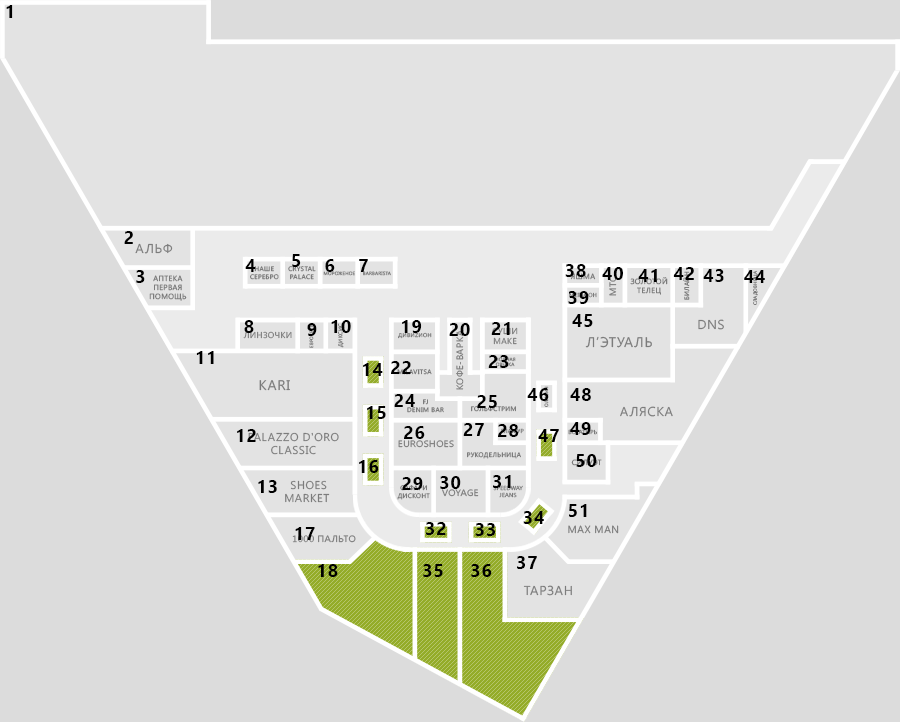
<style>
.page{position:relative;width:900px;height:722px;background:#dcdcdc}
.page>*{position:absolute;margin:0}
.t1{font:18px "SegoeUI-Bold";letter-spacing:0.05em;color:#000000;text-transform:uppercase}
.t2{font:13.1px "SegoeUI";letter-spacing:0.05em;color:#7c7c7c;text-transform:uppercase}
.t3{font:6.6px "SegoeUI";letter-spacing:0.05em;color:#7c7c7c;text-transform:uppercase}
.t4{font:4.7px "SegoeUI";letter-spacing:0.05em;color:#7c7c7c;text-transform:uppercase}
.t5{font:7.5px "SegoeUI";letter-spacing:0.05em;color:#7c7c7c;text-transform:uppercase}
.t6{font:9.4px "SegoeUI";letter-spacing:0.05em;text-transform:uppercase}
.t7{font:8.4px "SegoeUI";letter-spacing:0.05em;color:#7c7c7c;text-transform:uppercase}
.t8{font:8.4px "SegoeUI";letter-spacing:0.05em;text-transform:uppercase}
.t9{font:5.6px "SegoeUI";letter-spacing:0.05em;color:#7c7c7c;text-transform:uppercase}
.t10{font:14px "SegoeUI";letter-spacing:0.05em;color:#7c7c7c;text-transform:uppercase}
.t11{font:4.7px "SegoeUI";letter-spacing:0.05em;text-transform:uppercase}
.t12{font:11.2px "SegoeUI";letter-spacing:0.05em;color:#7c7c7c;text-transform:uppercase}
.t13{font:10.3px "SegoeUI";letter-spacing:0.05em;color:#7c7c7c;text-transform:uppercase}
.t14{font:13px "SegoeUI";letter-spacing:0.05em;color:#7c7c7c;text-transform:uppercase}
</style>
<div class="page">
<p class="t1" style="left:6px;top:5px;width:7px;height:13px">1</p>
<p class="t1" style="left:124px;top:231px;width:9px;height:13px">2</p>
<p class="t2" style="left:135px;top:243px;width:38px;height:11px">Альф</p>
<p class="t1" style="left:292px;top:254px;width:9px;height:13px">5</p>
<p class="t1" style="left:136px;top:270px;width:9px;height:13px">3</p>
<p class="t1" style="left:245px;top:259px;width:11px;height:13px">4</p>
<p class="t3" style="left:250px;top:266px;width:29px;height:14px;text-align:center">Наше<br>серебро</p>
<p class="t3" style="left:288px;top:266px;width:28px;height:14px;text-align:center">Crystal<br>palace</p>
<p class="t1" style="left:325px;top:259px;width:10px;height:13px">6</p>
<p class="t1" style="left:359px;top:259px;width:9px;height:13px">7</p>
<p class="t1" style="left:565px;top:264px;width:21px;height:13px">38</p>
<p class="t1" style="left:602px;top:267px;width:21px;height:13px">40</p>
<p class="t1" style="left:638px;top:269px;width:19px;height:13px">41</p>
<p class="t1" style="left:673px;top:267px;width:21px;height:13px">42</p>
<p class="t1" style="left:703px;top:269px;width:21px;height:13px">43</p>
<p class="t1" style="left:744px;top:270px;width:21px;height:13px">44</p>
<p class="t4" style="left:753px;top:270px;width:5px;height:35px;rotate:-90deg">Сладовница</p>
<p class="t5" style="left:149px;top:275px;width:38px;height:26px;text-align:center">Аптека<br>первая<br>помощь</p>
<p class="t4" style="left:323px;top:271px;width:32px;height:5px">Мороженое</p>
<p class="t4" style="left:363px;top:271px;width:28px;height:5px">Barbarista</p>
<p class="t5" style="left:570px;top:273px;width:26px;height:7px">Яшма</p>
<p class="t6" style="left:609px;top:276px;width:8px;height:20px;rotate:-90deg">мтс</p>
<p class="t5" style="left:630px;top:277px;width:38px;height:18px;text-align:center">Золотой<br>телец</p>
<p class="t3" style="left:683px;top:271px;width:7px;height:29px;rotate:-90deg">Билайн</p>
<p class="t1" style="left:568px;top:291px;width:21px;height:13px">39</p>
<p class="t1" style="left:572px;top:314px;width:21px;height:13px">45</p>
<p class="t1" style="left:244px;top:320px;width:10px;height:13px">8</p>
<p class="t1" style="left:307px;top:323px;width:10px;height:13px">9</p>
<p class="t1" style="left:331px;top:320px;width:20px;height:13px">10</p>
<p class="t1" style="left:402px;top:320px;width:20px;height:13px">19</p>
<p class="t1" style="left:449px;top:323px;width:21px;height:13px">20</p>
<p class="t1" style="left:491px;top:322px;width:19px;height:13px">21</p>
<p class="t7" style="left:492px;top:327px;width:26px;height:18px;text-align:center">суши<br>Make</p>
<p class="t2" style="left:698px;top:319px;width:26px;height:11px">DNS</p>
<p class="t8" style="left:243px;top:331px;width:49px;height:8px">ЛинзОчки</p>
<p class="t9" style="left:398px;top:332px;width:34px;height:7px">Дивиzион</p>
<p class="t6" style="left:456px;top:330px;width:8px;height:60px;rotate:-90deg">Кофе-варка</p>
<p class="t10" style="left:585px;top:336px;width:67px;height:12px">Л’этуаль</p>
<p class="t1" style="left:196px;top:351px;width:18px;height:13px">11</p>
<p class="t1" style="left:363px;top:363px;width:20px;height:13px">14</p>
<p class="t1" style="left:391px;top:361px;width:20px;height:13px">22</p>
<p class="t1" style="left:488px;top:355px;width:21px;height:13px">23</p>
<p class="t3" style="left:397px;top:369px;width:35px;height:6px">Milavitsa</p>
<p class="t10" style="left:259px;top:380px;width:31px;height:11px">Kari</p>
<p class="t1" style="left:527px;top:388px;width:22px;height:13px">46</p>
<p class="t11" style="left:544px;top:386px;width:5px;height:21px;rotate:-90deg">Оливин</p>
<p class="t1" style="left:570px;top:388px;width:21px;height:13px">48</p>
<p class="t1" style="left:394px;top:394px;width:21px;height:13px">24</p>
<p class="t3" style="left:407px;top:399px;width:37px;height:14px;text-align:center">FJ<br>Denim Bar</p>
<p class="t1" style="left:477px;top:395px;width:20px;height:13px">25</p>
<p class="t1" style="left:367px;top:406px;width:19px;height:13px">15</p>
<p class="t3" style="left:471px;top:406px;width:45px;height:6px">Гольфстрим</p>
<p class="t2" style="left:620px;top:406px;width:53px;height:11px">Аляска</p>
<p class="t1" style="left:463px;top:423px;width:21px;height:13px">27</p>
<p class="t1" style="left:498px;top:424px;width:21px;height:13px">28</p>
<p class="t1" style="left:570px;top:422px;width:21px;height:13px">49</p>
<p class="t1" style="left:237px;top:429px;width:19px;height:13px">12</p>
<p class="t12" style="left:248px;top:432px;width:91px;height:23px;text-align:center">Palazzo D'oro<br>CLASSIC</p>
<p class="t1" style="left:404px;top:426px;width:21px;height:13px">26</p>
<p class="t1" style="left:538px;top:429px;width:21px;height:13px">47</p>
<p class="t6" style="left:398px;top:440px;width:56px;height:8px">Euroshoes</p>
<p class="t1" style="left:359px;top:460px;width:20px;height:13px">16</p>
<p class="t3" style="left:467px;top:452px;width:54px;height:7px">Рукодельница</p>
<p class="t1" style="left:576px;top:454px;width:21px;height:13px">50</p>
<p class="t1" style="left:258px;top:480px;width:19px;height:13px">13</p>
<p class="t12" style="left:285px;top:480px;width:45px;height:23px;text-align:center">Shoes<br>market</p>
<p class="t3" style="left:397px;top:485px;width:33px;height:15px;text-align:center">Сафари<br>дисконт</p>
<p class="t1" style="left:402px;top:477px;width:21px;height:13px">29</p>
<p class="t1" style="left:440px;top:476px;width:21px;height:13px">30</p>
<p class="t9" style="left:493px;top:485px;width:30px;height:13px;text-align:center">SPEEDWAY<br>JEANS</p>
<p class="t1" style="left:493px;top:475px;width:18px;height:13px">31</p>
<p class="t6" style="left:442px;top:489px;width:37px;height:8px">VOYAGE</p>
<p class="t1" style="left:569px;top:504px;width:18px;height:13px">51</p>
<p class="t1" style="left:523px;top:511px;width:21px;height:13px">34</p>
<p class="t1" style="left:295px;top:527px;width:20px;height:13px">17</p>
<p class="t1" style="left:426px;top:522px;width:20px;height:13px">32</p>
<p class="t1" style="left:475px;top:523px;width:20px;height:13px">33</p>
<p class="t13" style="left:568px;top:525px;width:51px;height:9px">Max man</p>
<p class="t6" style="left:292px;top:535px;width:64px;height:8px">1000 пальто</p>
<p class="t1" style="left:517px;top:556px;width:20px;height:13px">37</p>
<p class="t1" style="left:318px;top:564px;width:20px;height:13px">18</p>
<p class="t1" style="left:423px;top:564px;width:20px;height:13px">35</p>
<p class="t1" style="left:471px;top:564px;width:21px;height:13px">36</p>
<p class="t14" style="left:523px;top:585px;width:49px;height:11px">Тарзан</p>
</div>
